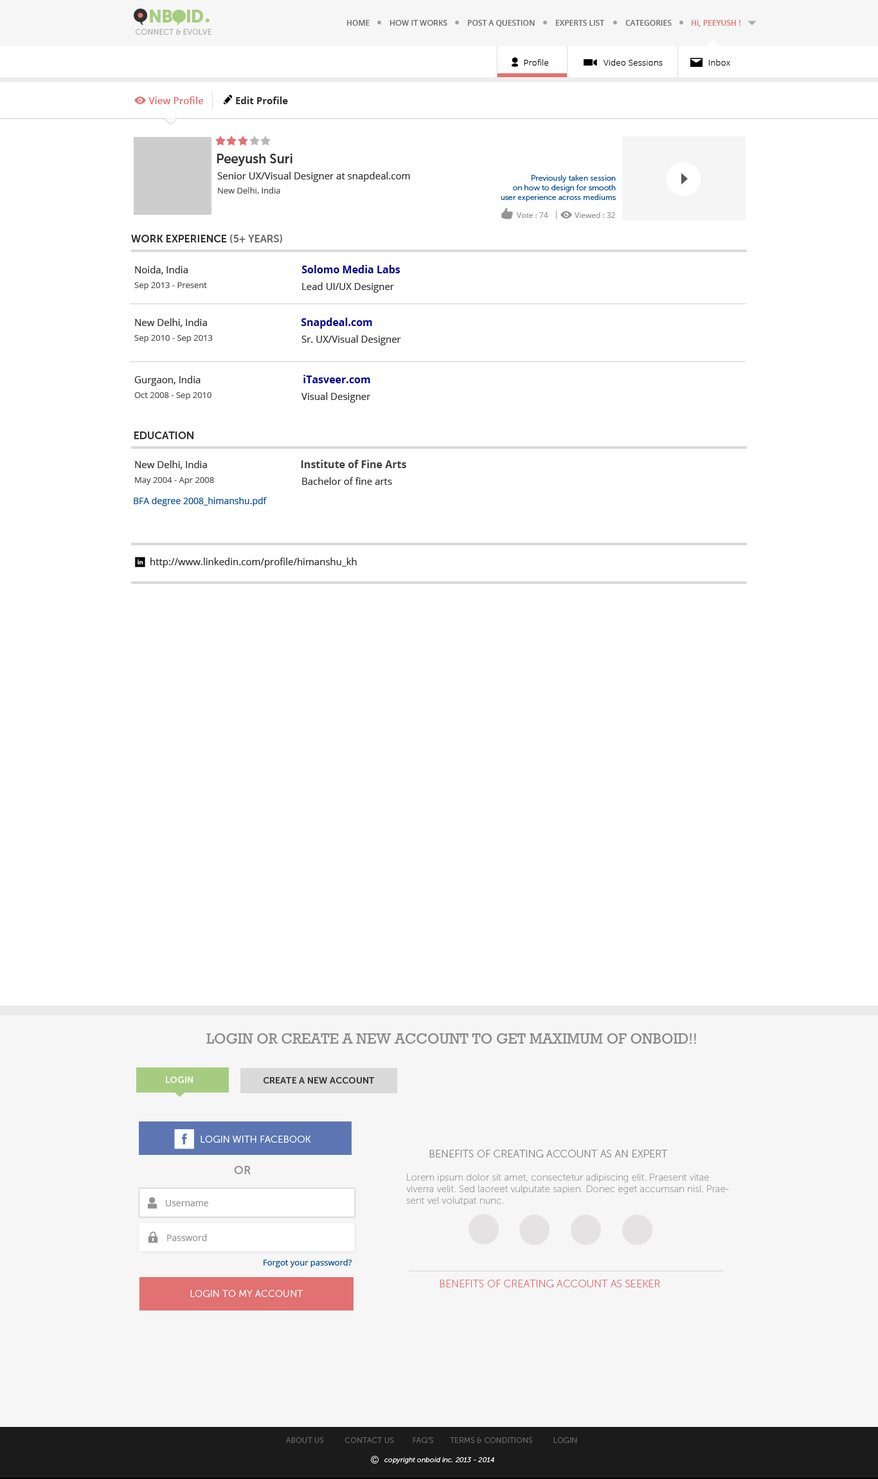
<style>
.page{position:relative;width:878px;height:1479px;background:#ffffff}
.page>*{position:absolute;margin:0}
.t1{font:17.3px "MuseoSans-900";letter-spacing:-0.04em;color:#a6cc81;text-transform:uppercase}
.t2{font:7.7px "MuseoSans-300";color:#a8a8a7;text-transform:uppercase}
.t3{font:7.7px "OpenSans-Semibold";color:#6a6a6a;text-transform:uppercase}
.t4{font:7.7px "MuseoSans-500";color:#6a6a6a;text-transform:uppercase}
.t5{font:7.7px "OpenSans-Semibold";color:#e27171;text-transform:uppercase}
.t6{font:7.7px "OpenSans-Semibold";color:#e27171}
.t7{font:8.4px "OpenSans-Light";letter-spacing:0.03em;color:#000000}
.t8{font:9.6px "OpenSans-Semibold";color:#e27171}
.t9{font:9.6px "OpenSans-Bold";color:#303030}
.t10{font:12.9px "MuseoSans-700";color:#303030}
.t11{font:9.6px/11.6px "OpenSans";color:#313030}
.t12{font:8.4px/14.1px "OpenSans";color:#525151}
.t13{font:7.7px/9.6px "MuseoSans-300";color:#004b91}
.t14{font:7.7px "OpenSans";color:#939393}
.t15{font:10.3px "MuseoSans-700";color:#303030;text-transform:uppercase}
.t16{font:10.3px "MuseoSans-700";color:#6c6a6a;text-transform:uppercase}
.t17{font:8.4px/14.8px "OpenSans";color:#525151}
.t18{font:10.3px "OpenSans-Bold";color:#000491}
.t19{font:9.6px "OpenSans";color:#313030}
.t20{font:10.3px "OpenSans-Bold";color:#3f3f3f}
.t21{font:9px "OpenSans";color:#004b91}
.t22{font:14.8px "Rockwell";color:#888888}
.t23{font:9px "MuseoSans-700";color:#ffffff;text-transform:uppercase}
.t24{font:9px "MuseoSans-700";color:#303030;text-transform:uppercase}
.t25{font:9.6px "MuseoSans-300";color:#ffffff;text-transform:uppercase}
.t26{font:10.3px "MuseoSans-100";color:#838282}
.t27{font:11.6px "MuseoSans-700";color:#939393;text-transform:uppercase}
.t28{font:9.6px "MuseoSans-100";color:#a2a2a2}
.t29{font:9px "OpenSans";color:#939393}
.t30{font:8.4px "OpenSans";color:#004b91}
.t31{font:10.3px "MuseoSans-100";color:#e27171}
.t32{font:7.7px "MuseoSans-300";color:#6a6a6a;text-transform:uppercase}
.t33{font:7.1px "MuseoSans-300Italic";color:#ffffff}
</style>
<div class="page">
<p class="t1" style="left:150px;top:10px;width:53px;height:12px">nboid</p>
<p class="t2" style="left:136px;top:29px;width:76px;height:6px">Connect &amp; evolve</p>
<p class="t3" style="left:347px;top:20px;width:23px;height:6px">home</p>
<p class="t4" style="left:390px;top:20px;width:57px;height:6px">how it works</p>
<p class="t3" style="left:468px;top:20px;width:67px;height:7px">Post a Question</p>
<p class="t3" style="left:556px;top:20px;width:48px;height:6px">experts list</p>
<p class="t3" style="left:626px;top:20px;width:46px;height:6px">categories</p>
<p class="t5" style="left:692px;top:20px;width:49px;height:7px"><span class="t6">Hi</span>, Peeyush !</p>
<p class="t7" style="left:524px;top:59px;width:24px;height:7px">Profile</p>
<p class="t7" style="left:604px;top:59px;width:59px;height:7px">Video Sessions</p>
<p class="t7" style="left:708px;top:59px;width:22px;height:7px">Inbox</p>
<p class="t8" style="left:148px;top:96px;width:56px;height:8px">View Profile</p>
<p class="t9" style="left:236px;top:96px;width:52px;height:8px">Edit Profile</p>
<p class="t10" style="left:217px;top:154px;width:75px;height:12px">Peeyush Suri</p>
<p class="t11" style="left:217px;top:172px;width:193px;height:22px">Senior UX/Visual Designer at snapdeal.com<br><span class="t12">New Delhi, India</span></p>
<p class="t13" style="left:501px;top:175px;width:115px;height:27px;text-align:right">Previously taken session<br>on how to design for smooth<br>user experience across mediums</p>
<p class="t14" style="left:517px;top:212px;width:31px;height:6px">Vote : 74</p>
<p class="t14" style="left:575px;top:212px;width:40px;height:6px">Viewed : 32</p>
<p class="t15" style="left:131px;top:234px;width:151px;height:9px">Work Experience <span class="t16">(5+ Years)</span></p>
<p class="t17" style="left:134px;top:266px;width:73px;height:24px"><span class="t11">Noida, India<br></span>Sep 2013 - Present</p>
<p class="t18" style="left:302px;top:265px;width:99px;height:8px">Solomo Media Labs</p>
<p class="t19" style="left:302px;top:282px;width:92px;height:10px">Lead UI/UX Designer</p>
<p class="t18" style="left:302px;top:318px;width:70px;height:10px">Snapdeal.com</p>
<p class="t17" style="left:134px;top:318px;width:79px;height:25px"><span class="t11">New Delhi, India<br></span>Sep 2010 - Sep 2013</p>
<p class="t19" style="left:302px;top:335px;width:99px;height:10px">Sr. UX/Visual Designer</p>
<p class="t17" style="left:134px;top:375px;width:78px;height:25px"><span class="t11">Gurgaon, India<br></span>Oct 2008 - Sep 2010</p>
<p class="t18" style="left:303px;top:375px;width:67px;height:8px">iTasveer.com</p>
<p class="t19" style="left:302px;top:392px;width:69px;height:10px">Visual Designer</p>
<p class="t15" style="left:134px;top:431px;width:60px;height:8px">Education</p>
<p class="t17" style="left:135px;top:460px;width:79px;height:25px"><span class="t11">New Delhi, India<br></span>May 2004 - Apr 2008</p>
<p class="t20" style="left:301px;top:460px;width:105px;height:8px">Institute of Fine Arts</p>
<p class="t19" style="left:302px;top:477px;width:90px;height:8px">Bachelor of fine arts</p>
<p class="t21" style="left:134px;top:497px;width:133px;height:9px">BFA degree 2008_himanshu.pdf</p>
<p class="t19" style="left:150px;top:557px;width:207px;height:11px">http://www.linkedin.com/profile/himanshu_kh</p>
<p class="t22" style="left:206px;top:1033px;width:490px;height:10px">LOGIN OR CREATE A NEW ACCOUNT TO GET MAXIMUM OF ONBOID!!</p>
<p class="t23" style="left:166px;top:1076px;width:27px;height:7px">LOGIN</p>
<p class="t24" style="left:264px;top:1077px;width:111px;height:6px">cREATE A NEW ACCOUNT</p>
<p class="t25" style="left:201px;top:1135px;width:110px;height:7px">Login with facebook</p>
<p class="t26" style="left:429px;top:1149px;width:239px;height:8px">BENEFITS OF CREATING ACCOUNT AS AN EXPERT</p>
<p class="t27" style="left:234px;top:1166px;width:17px;height:8px">or</p>
<p class="t28" style="left:406px;top:1173px;width:323px;height:32px">Lorem ipsum dolor sit amet, consectetur adipiscing elit. Praesent vitae viverra velit. Sed laoreet vulputate sapien. Donec eget accumsan nisl. Praesent vel volutpat nunc.</p>
<p class="t29" style="left:166px;top:1200px;width:42px;height:6px">Username</p>
<p class="t29" style="left:167px;top:1234px;width:40px;height:7px">Password</p>
<p class="t30" style="left:264px;top:1259px;width:88px;height:8px">Forgot your password?</p>
<p class="t25" style="left:190px;top:1290px;width:113px;height:7px">Login to my account</p>
<p class="t31" style="left:440px;top:1279px;width:220px;height:8px">BENEFITS OF CREATING ACCOUNT AS SEEKER</p>
<p class="t32" style="left:286px;top:1437px;width:291px;height:6px">About us       COntact us         FAQ’s  Terms &amp; conditions          Login</p>
<p class="t33" style="left:384px;top:1457px;width:110px;height:6px">copyright onboid inc. 2013 - 2014</p>
</div>
